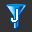
<style>
.page{position:relative;width:32px;height:32px;background:#333333}
.page>*{position:absolute;margin:0}
.t1{font:18px "ArialMT";color:#ffffff}
</style>
<div class="page">
<p class="t1" style="left:11px;top:9px;width:7px;height:13px">J</p>
</div>
